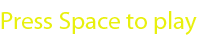
<style>
.page{position:relative;width:200px;height:50px;background:#ffffff}
.page>*{position:absolute;margin:0}
.t1{font:25px "MyriadPro-Regular";color:#e8f00d}
</style>
<div class="page">
<p class="t1" style="left:1px;top:11px;width:196px;height:24px">Press Space to play</p>
</div>
